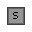
<style>
.page{position:relative;width:32px;height:32px;background:#ffffff}
.page>*{position:absolute;margin:0}
.t1{font:8px "KenPixel";color:#010101}
</style>
<div class="page">
<p class="t1" style="left:13px;top:12px;width:5px;height:7px">S</p>
</div>
